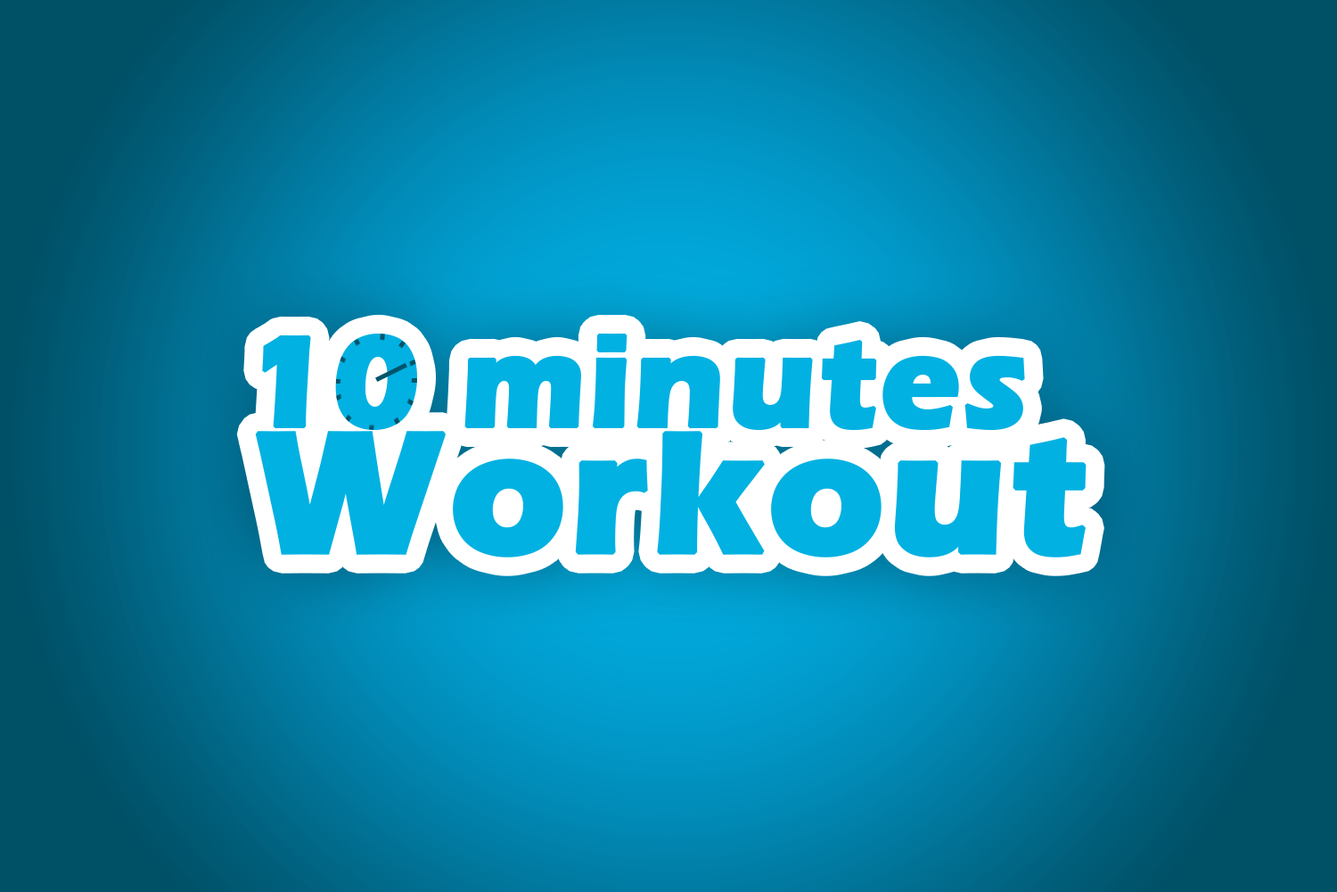
<style>
.page{position:relative;width:1337px;height:892px}
.page>*{position:absolute;margin:0}
.t1{font:133.7px "ErasITC-Bold";color:#01b1e2;font-weight:bold}
.t2{font:178.3px "ErasITC-Bold";color:#01b1e2;font-weight:bold}
</style>
<div class="page">
<p class="t1" style="left:262px;top:333px;width:763px;height:98px">10 minutes</p>
<p class="t2" style="left:255px;top:431px;width:832px;height:126px">Workout</p>
</div>
